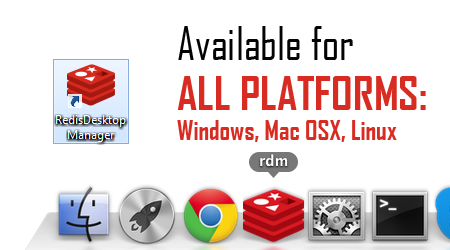
<style>
.page{position:relative;width:450px;height:250px;background:#ffffff}
.page>*{position:absolute;margin:0}
.t1{font:26px/30px "AgencyFB-Bold";color:#d82c22}
.t2{font:45px/50px "AgencyFB-Reg";color:#040404}
.t3{font:45px/50px "AgencyFB-Bold";color:#d82c22}
</style>
<div class="page">
<p class="t1" style="left:177px;top:26px;width:249px;height:116px"><span class="t2">Available for<br></span><span class="t3">ALL PLATFORMS:<br></span>Windows, Mac OSX, Linux</p>
</div>
